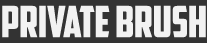
<style>
.page{position:relative;width:207px;height:43px;background:#333333}
.page>*{position:absolute;margin:0}
.t1{font:43px "AmericanCaptain";color:#f2f2f2}
</style>
<div class="page">
<p class="t1" style="left:2px;top:5px;width:204px;height:33px">PRIVATE BRUSH</p>
</div>
